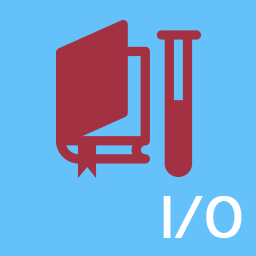
<style>
.page{position:relative;width:256px;height:256px;background:#64c1f9}
.page>*{position:absolute;margin:0}
.t1{font:52px "GenevaCY";color:#ffffff;font-weight:bold}
</style>
<div class="page">
<p class="t1" style="left:163px;top:196px;width:79px;height:42px">I/O</p>
</div>
